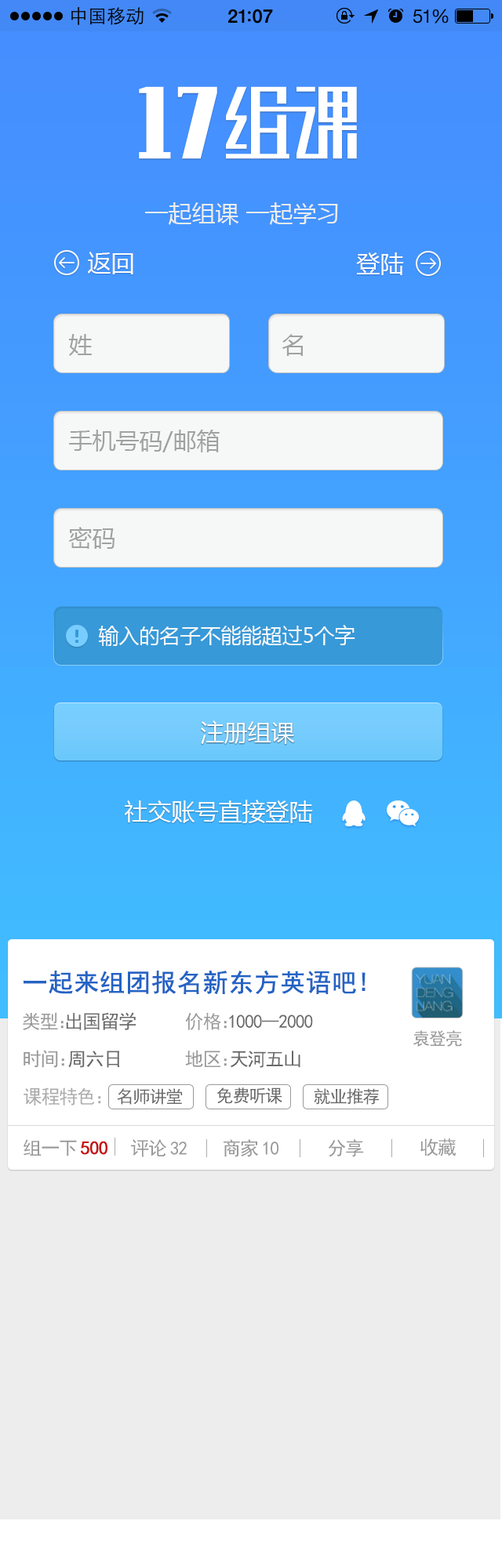
<style>
.page{position:relative;width:502px;height:1568px;background:#ededed}
.page>*{position:absolute;margin:0}
.t1{font:23.5px "MicrosoftYaHei";color:#ededed}
.t2{font:23.5px "MicrosoftYaHei";color:#fefefe}
.t3{font:23.5px "MicrosoftYaHei";color:#a1a1a1}
.t4{font:20.4px "MicrosoftYaHei";color:#f6f8f8}
.t5{font:23.5px "MicrosoftYaHei"}
.t6{font:25.1px "SimHei";color:#2463c5;font-weight:bold}
.t7{font:18.8px "SimHei";letter-spacing:-0.05em;color:#696969}
.t8{font:18.8px "SimHei";letter-spacing:-0.05em;color:#999999}
.t9{font:18.8px "SimHei";letter-spacing:-0.62em;color:#999999}
.t10{font:17.2px "SimHei";letter-spacing:-0.05em;color:#999999}
.t11{font:18.8px "SimHei";letter-spacing:-0.5em;color:#999999}
.t12{font:18.8px "SimHei";letter-spacing:-0.52em;color:#999999}
.t13{font:18.8px "SimHei";letter-spacing:-0.05em;color:#acacac}
.t14{font:18.8px "SimHei";color:#acacac}
.t15{font:17.2px "SimHei";letter-spacing:-0.05em;color:#696969}
.t16{font:18.8px "SimHei";letter-spacing:-0.05em;color:#c61414;font-weight:bold}
.t17{font:18.8px "SimHei";letter-spacing:0.15em;color:#999999}
</style>
<div class="page">
<p class="t1" style="left:145px;top:202px;width:193px;height:23px">一起组课 一起学习</p>
<p class="t2" style="left:88px;top:252px;width:45px;height:22px">返回</p>
<p class="t2" style="left:356px;top:252px;width:48px;height:23px">登陆</p>
<p class="t3" style="left:69px;top:334px;width:23px;height:22px">姓</p>
<p class="t3" style="left:281px;top:334px;width:22px;height:22px">名</p>
<p class="t3" style="left:69px;top:430px;width:151px;height:22px">手机号码/邮箱</p>
<p class="t3" style="left:68px;top:527px;width:46px;height:22px">密码</p>
<p class="t4" style="left:98px;top:625px;width:257px;height:21px">输入的名子不能能超过5个字</p>
<p class="t2" style="left:201px;top:720px;width:93px;height:24px">注册组课</p>
<p class="t5" style="left:201px;top:720px;width:92px;height:24px">注册账户</p>
<p class="t2" style="left:125px;top:800px;width:188px;height:23px">社交账号直接登陆</p>
<p class="t6" style="left:24px;top:970px;width:341px;height:24px">一起来组团报名新东方英语吧!</p>
<p class="t7" style="left:23px;top:1012px;width:113px;height:18px"><span class="t8">类型</span><span class="t9">：</span>出国留学</p>
<p class="t7" style="left:185px;top:1012px;width:128px;height:18px"><span class="t8">价格</span><span class="t9">：</span>1000--2000</p>
<p class="t10" style="left:412px;top:1030px;width:50px;height:17px">袁登亮</p>
<p class="t7" style="left:24px;top:1050px;width:95px;height:18px"><span class="t8">时间</span><span class="t11">：</span>周六日</p>
<p class="t7" style="left:185px;top:1050px;width:115px;height:18px"><span class="t8">地区</span><span class="t12">：</span>天河五山</p>
<p class="t13" style="left:24px;top:1087px;width:77px;height:18px">课程特色<span class="t14">：</span></p>
<p class="t15" style="left:117px;top:1088px;width:66px;height:17px">名师讲堂</p>
<p class="t15" style="left:216px;top:1087px;width:66px;height:17px">免费听课</p>
<p class="t15" style="left:314px;top:1088px;width:65px;height:17px">就业推荐</p>
<p class="t16" style="left:24px;top:1139px;width:83px;height:17px"><span class="t8">组一</span><span class="t17">下</span>500</p>
<p class="t8" style="left:131px;top:1139px;width:56px;height:18px">评<span class="t17">论</span>32</p>
<p class="t8" style="left:223px;top:1139px;width:55px;height:18px">商<span class="t17">家</span>10</p>
<p class="t8" style="left:328px;top:1139px;width:36px;height:18px">分享</p>
<p class="t8" style="left:420px;top:1138px;width:36px;height:18px">收藏</p>
</div>
